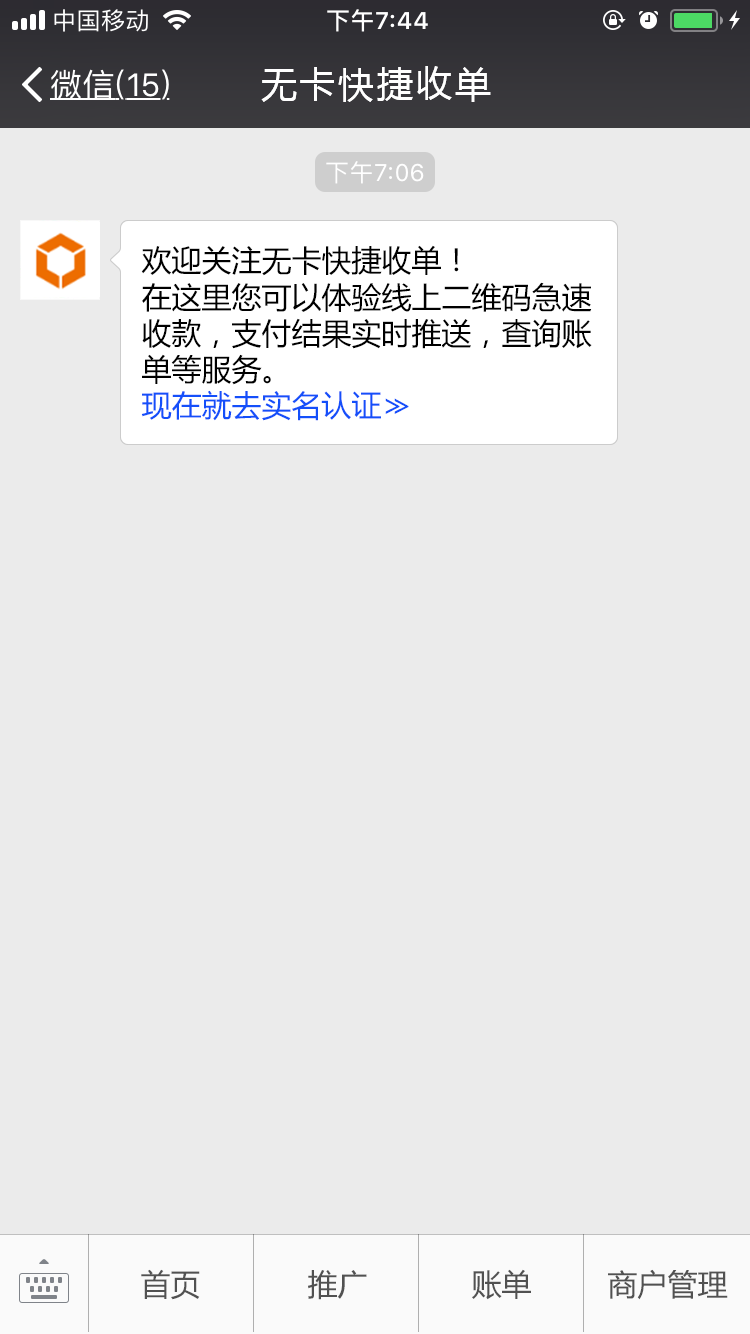
<style>
.page{position:relative;width:750px;height:1334px;background:#ebebeb}
.page>*{position:absolute;margin:0}
.t1{font:36px "MicrosoftYaHei";letter-spacing:0.08em;color:#ffffff}
.t2{font:30px "MicrosoftYaHei";color:#000000}
.t3{font:30px "MicrosoftYaHei";color:#144ffa}
.t4{font:30px "MicrosoftYaHei";letter-spacing:-0.44em;color:#144ffa}
.t5{font:30px "MicrosoftYaHei";color:#515151}
</style>
<div class="page">
<p class="t1" style="left:261px;top:66px;width:230px;height:36px">无卡快捷收单</p>
<p class="t2" style="left:141px;top:245px;width:318px;height:31px">欢迎关注无卡快捷收单！</p>
<p class="t2" style="left:141px;top:282px;width:451px;height:139px">在这里您可以体验线上二维码急速<br>收款，支付结果实时推送，查询账<br>单等服务。<br><span class="t3">现在就去实名认证</span><span class="t4">&gt;&gt;</span></p>
<p class="t5" style="left:141px;top:1269px;width:59px;height:31px">首页</p>
<p class="t5" style="left:308px;top:1270px;width:59px;height:30px">推广</p>
<p class="t5" style="left:472px;top:1269px;width:59px;height:31px">账单</p>
<p class="t5" style="left:608px;top:1269px;width:120px;height:31px">商户管理</p>
</div>
